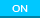
<style>
.page{position:relative;width:40px;height:18px;background:#00c8ff}
.page>*{position:absolute;margin:0}
.t1{font:10px "Lato-Regular";letter-spacing:0.01em;color:#ffffff}
</style>
<div class="page">
<p class="t1" style="left:12px;top:5px;width:16px;height:7px">ON</p>
</div>
